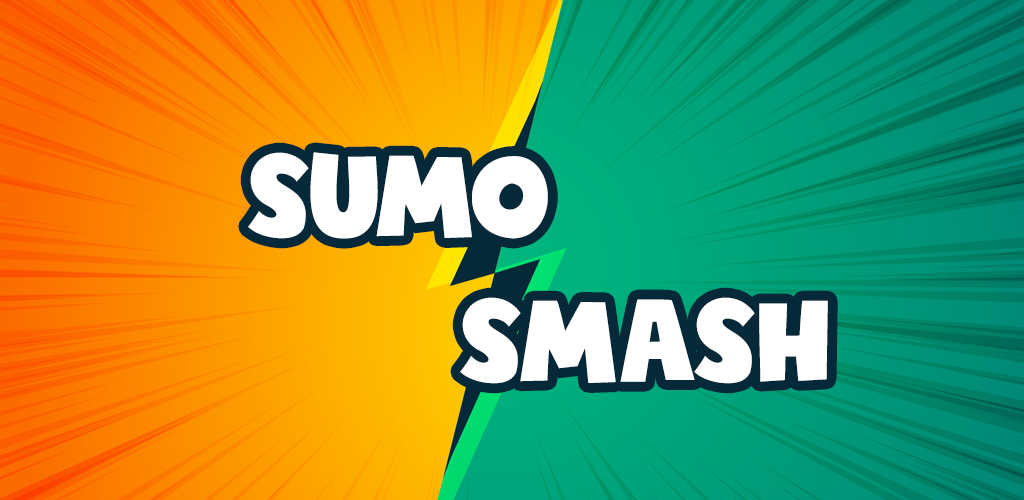
<style>
.page{position:relative;width:1024px;height:500px}
.page>*{position:absolute;margin:0}
.t1{font:120px "DKStickyToffee-Regular";color:#ffffff}
</style>
<div class="page">
<p class="t1" style="left:248px;top:152px;width:300px;height:87px">SUMO</p>
<p class="t1" style="left:460px;top:297px;width:368px;height:87px">SMASH</p>
</div>
